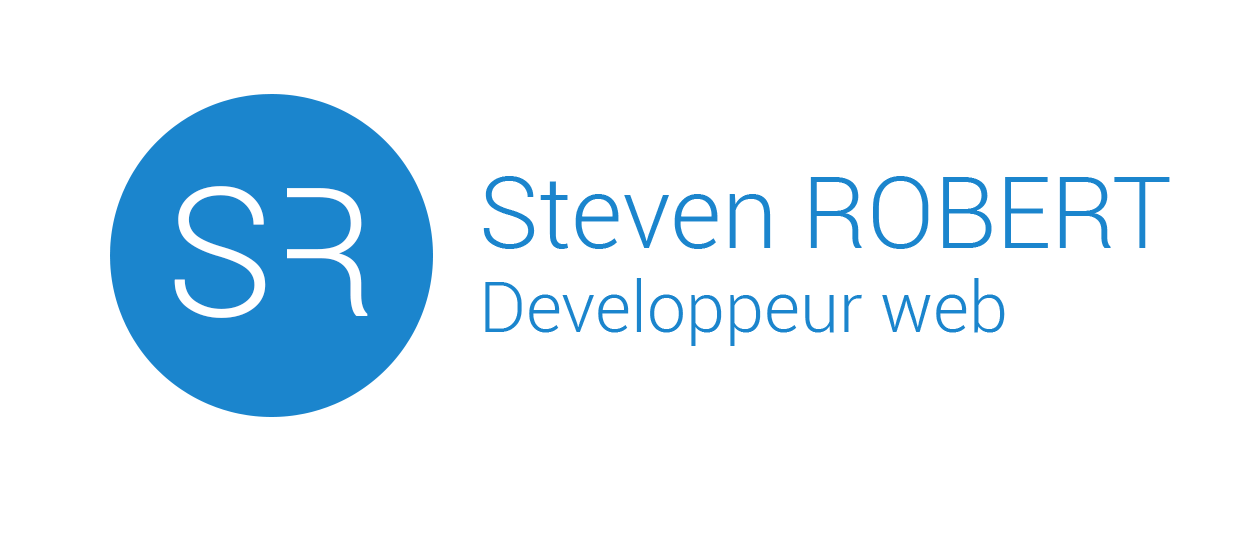
<style>
.page{position:relative;width:1250px;height:534px;background:#ffffff}
.page>*{position:absolute;margin:0}
.t1{font:70px "Roboto-Light";color:#1b85cd}
.t2{font:100px "Roboto-Light";color:#1b85cd}
.t3{font:180px "Roboto-Light";letter-spacing:-0.08em;color:#ffffff}
</style>
<div class="page">
<p class="t1" style="left:483px;top:176px;width:687px;height:170px"><span class="t2">Steven ROBERT<br></span>Developpeur web</p>
<p class="t3" style="left:174px;top:186px;width:194px;height:132px">SR</p>
</div>
